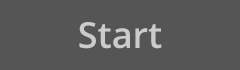
<style>
.page{position:relative;width:240px;height:70px;background:#555555}
.page>*{position:absolute;margin:0}
.t1{font:36px "OpenSans-Semibold";color:#cccccc}
</style>
<div class="page">
<p class="t1" style="left:79px;top:22px;width:83px;height:27px">Start</p>
</div>
